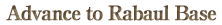
<style>
.page{position:relative;width:222px;height:25px;background:#ffffff}
.page>*{position:absolute;margin:0}
.t1{font:20px "RyuminPro-ExBold";letter-spacing:-0.08em;color:#6d5840;font-weight:bold}
</style>
<div class="page">
<p class="t1" style="left:6px;top:5px;width:211px;height:16px">Advance to Rabaul Base</p>
</div>
